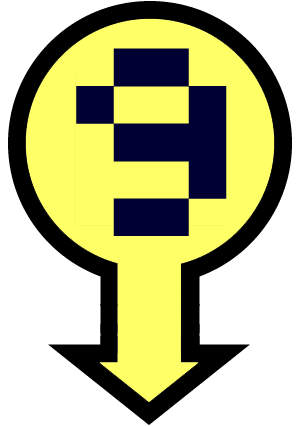
<style>
.page{position:relative;width:300px;height:426px;background:#ffffff}
.page>*{position:absolute;margin:0}
.t1{font:300px "04b03";color:#000033}
</style>
<div class="page">
<p class="t1" style="left:76px;top:48px;width:151px;height:188px">9</p>
</div>
